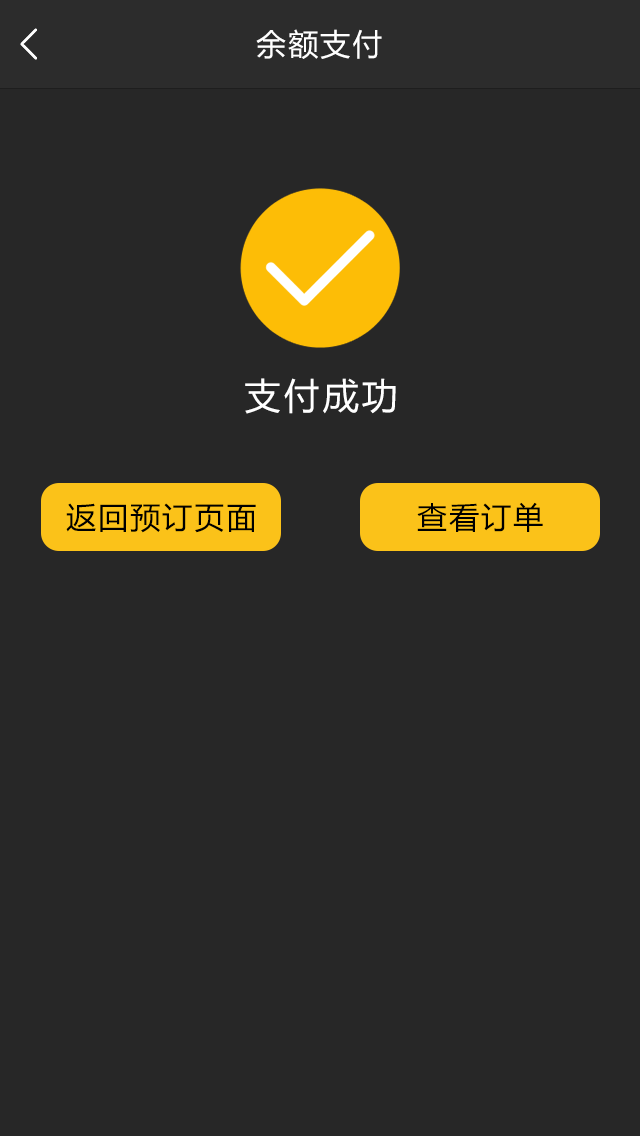
<style>
.page{position:relative;width:640px;height:1136px;background:#272727}
.page>*{position:absolute;margin:0}
.t1{font:30px "MicrosoftYaHei";letter-spacing:0.07em;color:#ffffff}
.t2{font:36px "MicrosoftYaHei";letter-spacing:0.07em;color:#ffffff}
.t3{font:30px "MicrosoftYaHei";letter-spacing:0.07em;color:#000000}
</style>
<div class="page">
<p class="t1" style="left:256px;top:29px;width:126px;height:30px">余额支付</p>
<p class="t2" style="left:245px;top:378px;width:151px;height:36px">支付成功</p>
<p class="t3" style="left:66px;top:503px;width:190px;height:30px">返回预订页面</p>
<p class="t3" style="left:417px;top:502px;width:126px;height:30px">查看订单</p>
</div>
